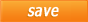
<style>
.page{position:relative;width:88px;height:22px}
.page>*{position:absolute;margin:0}
.t1{font:16px "Nina";letter-spacing:0.04em;color:#ffffff;font-weight:bold;font-style:italic}
</style>
<div class="page">
<p class="t1" style="left:27px;top:6px;width:32px;height:11px">save</p>
</div>
